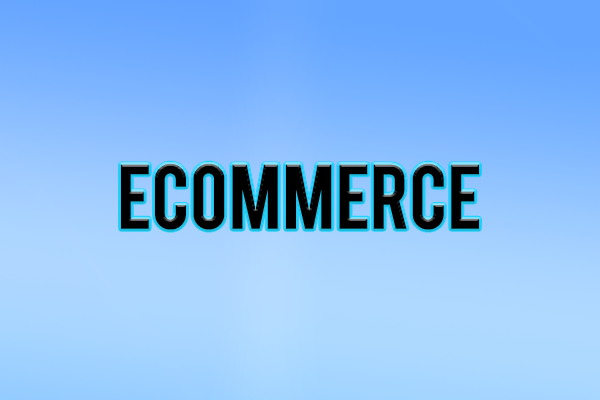
<style>
.page{position:relative;width:600px;height:400px}
.page>*{position:absolute;margin:0}
.t1{font:72px "Bebas";color:#000000;text-transform:uppercase}
</style>
<div class="page">
<p class="t1" style="left:121px;top:163px;width:358px;height:67px">eCommerce</p>
</div>
